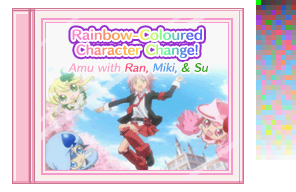
<style>
.page{position:relative;width:296px;height:192px;background:#ffffff}
.page>*{position:absolute;margin:0}
.t1{font:12px/15px "HummingStd-B";letter-spacing:0.02em}
.t2{font:12px/15px "HummingStd-B";letter-spacing:0.02em;scale:1.05 1}
.t3{font:12px/15px "HummingStd-B";letter-spacing:0.02em;scale:1.25 1}
.t4{font:10px "HummingStd-D";letter-spacing:0.02em;color:#f8a6ca;font-style:italic}
.t5{font:10px "HummingStd-D";letter-spacing:0.02em;color:#f85880;font-style:italic}
.t6{font:10px "HummingStd-D";letter-spacing:0.02em;color:#58a0f0;font-style:italic}
.t7{font:10px "HummingStd-D";letter-spacing:0.02em;color:#38a820;font-style:italic}
</style>
<div class="page">
<p class="t1" style="left:72px;top:29px;width:130px;height:29px;text-align:center"><span class="t2">Rainbow</span><span class="t3">-</span><span class="t2">Coloured<br></span>Character Change!</p>
<p class="t4" style="left:68px;top:62px;width:140px;height:12px">Amu with <span class="t5">Ran, </span><span class="t6">Miki, </span><span class="t7">&amp; Su</span></p>
</div>
